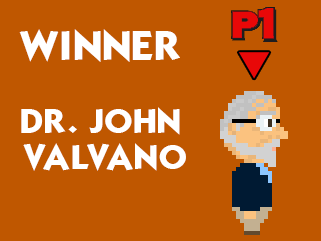
<style>
.page{position:relative;width:321px;height:241px;background:#bf5700}
.page>*{position:absolute;margin:0}
.t1{font:36px "KabelBd-Normal";color:#ffffff}
.t2{font:30px "KabelBd-Normal";color:#ffffff}
</style>
<div class="page">
<p class="t1" style="left:19px;top:29px;width:161px;height:33px">WINNER</p>
<p class="t2" style="left:21px;top:107px;width:165px;height:64px;text-align:center">DR. JOHN <br>VALVANO</p>
</div>
